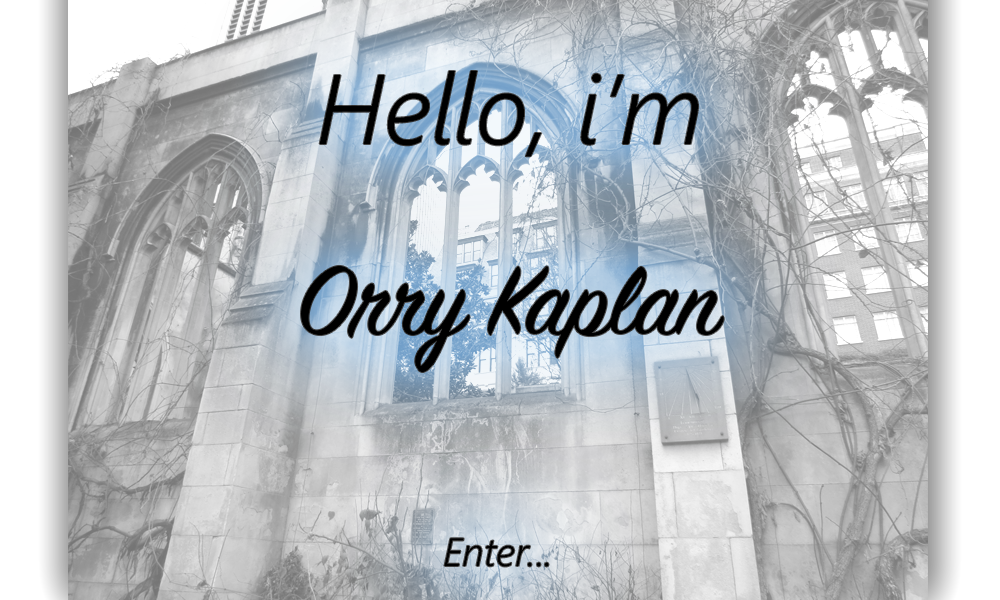
<style>
.page{position:relative;width:1000px;height:600px}
.page>*{position:absolute;margin:0}
.t1{font:98.5px "SegoeUI-SemilightItalic";color:#000000}
.t2{font:107.2px "SignPainter-HouseScript";color:#000000}
.t3{font:77.9px "SegoeUI-SemilightItalic";color:#000000}
.t4{font:39.7px "SegoeUI-SemilightItalic";color:#000000}
</style>
<div class="page">
<p class="t1" style="left:319px;top:71px;width:379px;height:86px">Hello, i’m</p>
<p class="t2" style="left:301px;top:265px;width:423px;height:107px"><span class="t3"><br><br></span>Orry Kaplan</p>
<p class="t4" style="left:444px;top:538px;width:105px;height:29px">Enter...</p>
</div>
